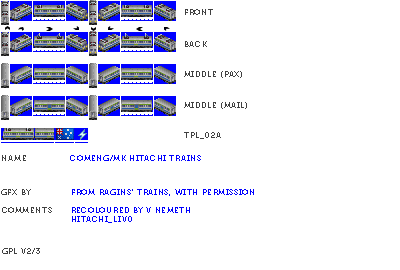
<style>
.page{position:relative;width:400px;height:270px;background:#ffffff}
.page>*{position:absolute;margin:0}
.t1{font:8px "Museo700-Regular";letter-spacing:0.075em;color:#404040;text-transform:uppercase}
.t2{font:8px "Museo700-Regular";letter-spacing:0.075em;color:#0000ff;text-transform:uppercase}
</style>
<div class="page">
<p class="t1" style="left:185px;top:9px;width:28px;height:6px">front</p>
<p class="t1" style="left:185px;top:41px;width:22px;height:6px">back</p>
<p class="t1" style="left:184px;top:71px;width:58px;height:7px">middle (pax)</p>
<p class="t1" style="left:184px;top:102px;width:63px;height:7px">middle (mail)</p>
<p class="t1" style="left:184px;top:132px;width:37px;height:7px">tpl_02a</p>
<p class="t1" style="left:2px;top:155px;width:24px;height:6px">name</p>
<p class="t2" style="left:70px;top:155px;width:131px;height:6px">Comeng/MK Hitachi Trains</p>
<p class="t1" style="left:1px;top:189px;width:30px;height:6px">gfx by</p>
<p class="t2" style="left:72px;top:189px;width:182px;height:7px">from ragins' trains, with permission</p>
<p class="t1" style="left:2px;top:207px;width:50px;height:6px">comments</p>
<p class="t2" style="left:72px;top:207px;width:118px;height:16px">recoloured by v nemeth<br>Hitachi_Liv0</p>
<p class="t1" style="left:2px;top:248px;width:38px;height:6px">gpl v2/3</p>
</div>
